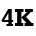
<style>
.page{position:relative;width:36px;height:36px;background:#ffffff}
.page>*{position:absolute;margin:0}
.t1{font:24px "Rockwell-Bold";color:#000000}
</style>
<div class="page">
<p class="t1" style="left:1px;top:9px;width:33px;height:17px">4K</p>
</div>
